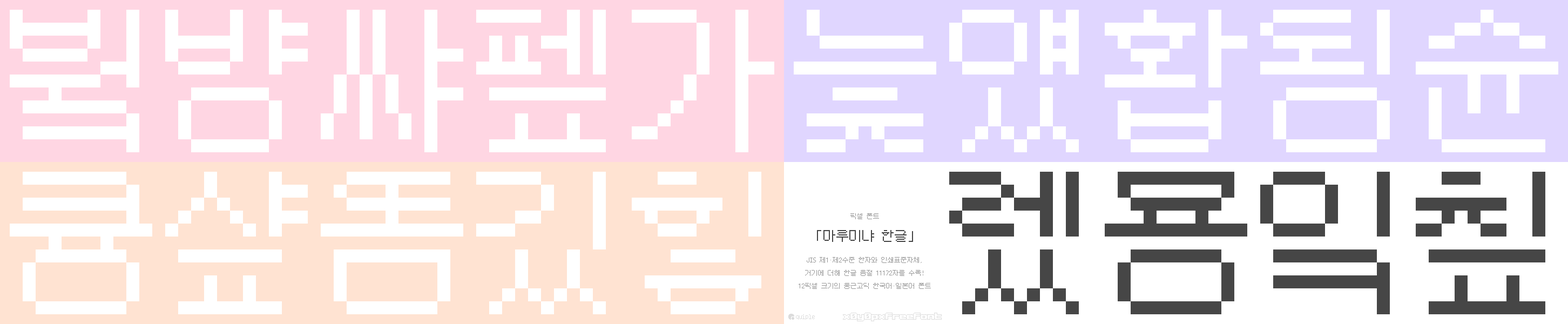
<style>
.page{position:relative;width:1568px;height:324px;background:#ffffff}
.page>*{position:absolute;margin:0}
.t1{font:155.5px "x12y12pxMaruMinyaHangul";color:#ffffff}
.t2{font:155.5px "x12y12pxMaruMinyaHangul";color:#464646}
.t3{font:6.5px "x12y12pxMaruMinyaHangul";color:#969696}
.t4{font:13px "x12y12pxMaruMinyaHangul";color:#464646}
.t5{font:6.5px/13px "x12y12pxMaruMinyaHangul";color:#969696}
.t6{font:6.5px "x12y12pxMaruMinyaHangul";color:#dcdcdc}
</style>
<div class="page">
<p class="t1" style="left:10px;top:10px;width:764px;height:142px">붴뱡쌰펲가</p>
<p class="t1" style="left:794px;top:10px;width:764px;height:142px">늧얬홥됭슌</p>
<p class="t1" style="left:10px;top:172px;width:751px;height:142px">큥샾똠깄힣</p>
<p class="t2" style="left:949px;top:172px;width:596px;height:142px">렜묭잌칲</p>
<p class="t3" style="left:850px;top:213px;width:29px;height:6px">픽셀 폰트</p>
<p class="t4" style="left:817px;top:230px;width:96px;height:12px">「마루미냐 한글」</p>
<p class="t5" style="left:799px;top:257px;width:132px;height:32px;text-align:center">JIS 제1·제2수준 한자와 인쇄표준자체,<br>거기에 더해 한글 음절 11172자를 수록!<br>12픽셀 크기의 둥근고딕 한국어·일본어 폰트</p>
<p class="t6" style="left:796px;top:314px;width:19px;height:6px">quiple</p>
</div>
